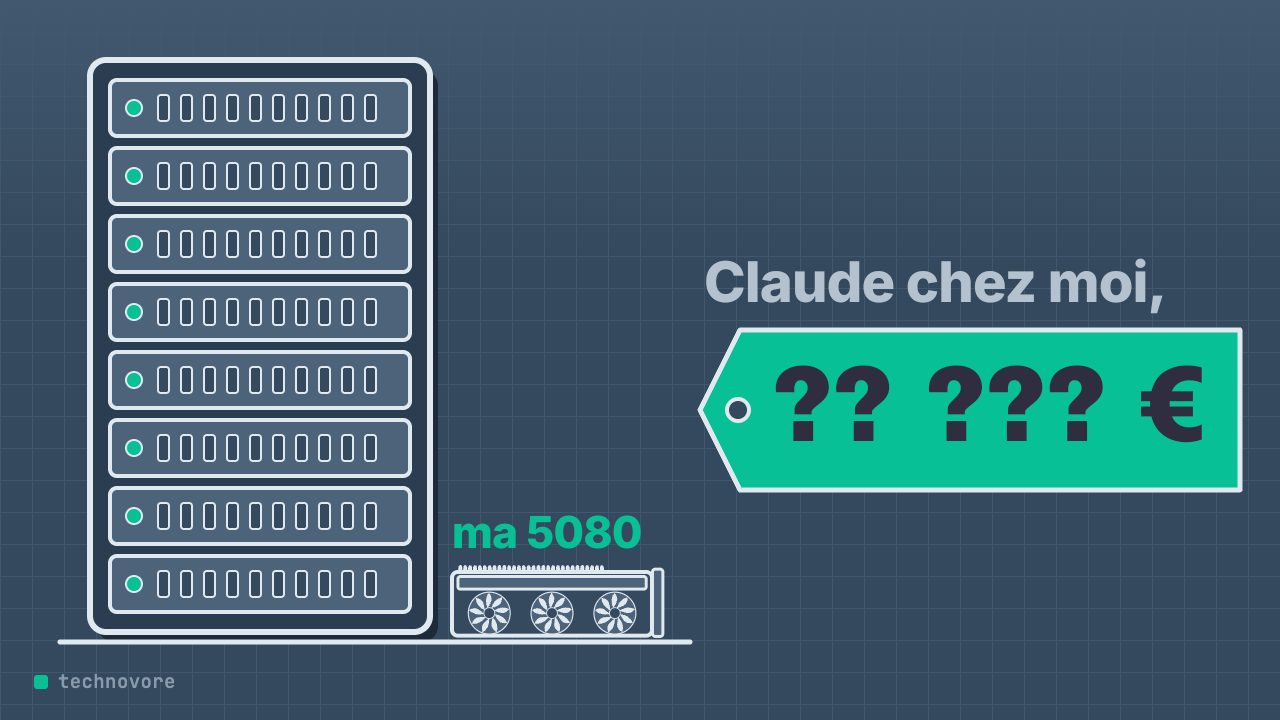
<style>
.page{position:relative;width:1280px;height:720px;background:#34495e}
.page>*{position:absolute;margin:0}
.t1{font:56px "Inter-ExtraBold";letter-spacing:-0.015em;color:#b4c1cf}
.t2{font:108px "ArchivoBlack-Regular";letter-spacing:-0.01em;color:#2f2e41;scale:0.93 1}
.t3{font:44px "Inter-ExtraBold";letter-spacing:-0.015em;color:#07c095}
</style>
<div class="page">
<p class="t1" style="left:705px;top:258px;width:459px;height:57px">Claude chez moi,</p>
<p class="t2" style="left:774px;top:365px;width:429px;height:79px">?? ??? €</p>
<p class="t3" style="left:453px;top:515px;width:189px;height:35px">ma 5080</p>
</div>
